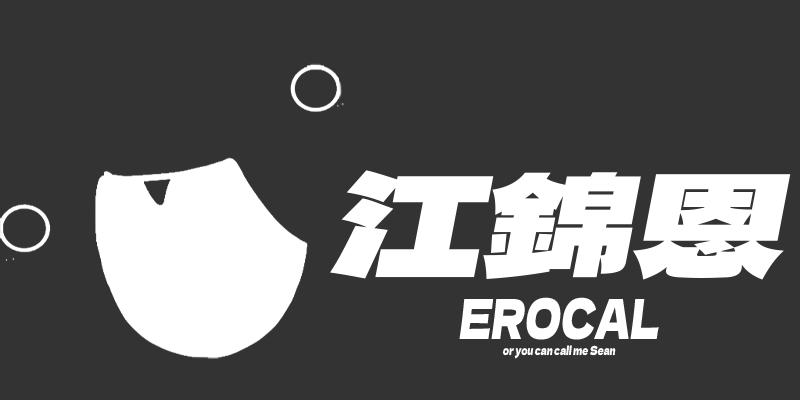
<style>
.page{position:relative;width:800px;height:400px;background:#333333}
.page>*{position:absolute;margin:0}
.t1{font:138px "DelaGothicOne-Regular";color:#ffffff;font-style:italic;scale:1.09 1}
.t2{font:55.3px "DelaGothicOne-Regular";color:#ffffff;font-style:italic;scale:0.67 1}
.t3{font:12.3px "DelaGothicOne-Regular";color:#ffffff;font-style:italic;scale:0.67 1}
</style>
<div class="page">
<p class="t1" style="left:330px;top:170px;width:461px;height:110px">江錦恩</p>
<p class="t2" style="left:459px;top:297px;width:200px;height:43px">EROCAL</p>
<p class="t3" style="left:502px;top:345px;width:114px;height:14px">or you can call me Sean</p>
</div>
